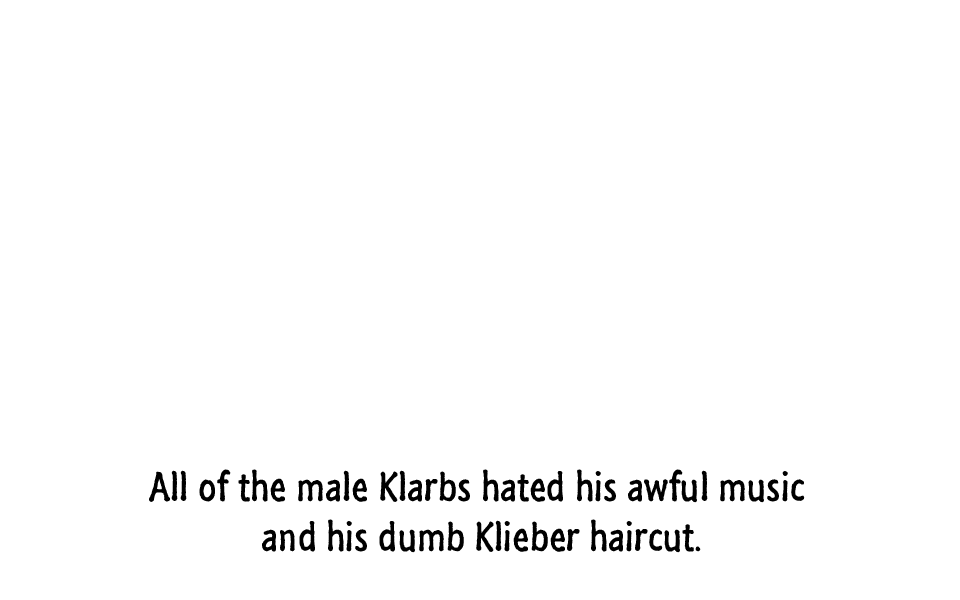
<style>
.page{position:relative;width:960px;height:600px;background:#ffffff}
.page>*{position:absolute;margin:0}
.t1{font:42px "SegoeMarker";color:#000000}
</style>
<div class="page">
<p class="t1" style="left:149px;top:469px;width:656px;height:84px;text-align:center">All of the male Klarbs hated his awful music <br>and his dumb Klieber haircut.</p>
</div>
